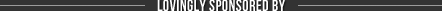
<style>
.page{position:relative;width:442px;height:11px;background:#333333}
.page>*{position:absolute;margin:0}
.t1{font:16px "BebasNeue";letter-spacing:0.025em;color:#ffffff}
</style>
<div class="page">
<p class="t1" style="left:157px;top:0px;width:128px;height:11px">Lovingly Sponsored By</p>
</div>
